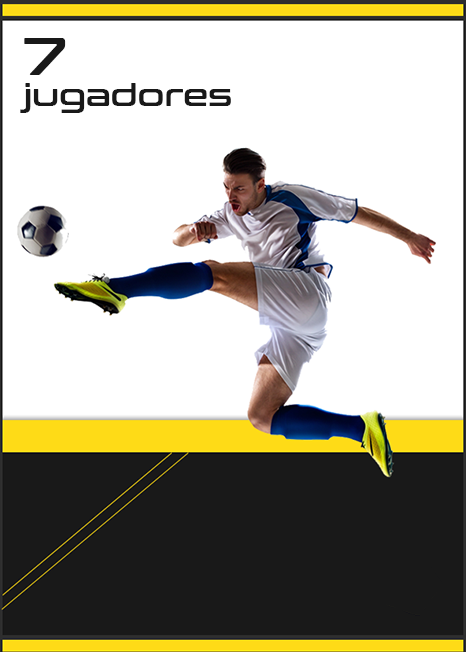
<style>
.page{position:relative;width:466px;height:652px;background:#ffffff}
.page>*{position:absolute;margin:0}
.t1{font:53.5px "ConthraxSb-Regular";color:#191919}
.t2{font:31.2px "ConthraxSb-Regular";color:#191919}
</style>
<div class="page">
<p class="t1" style="left:24px;top:38px;width:42px;height:37px">7</p>
<p class="t2" style="left:20px;top:83px;width:211px;height:30px">jugadores</p>
</div>
